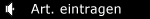
<style>
.page{position:relative;width:150px;height:19px;background:#000000}
.page>*{position:absolute;margin:0}
.t1{font:13px "Verdana";color:#ffffff}
</style>
<div class="page">
<p class="t1" style="left:31px;top:4px;width:90px;height:12px">Art. eintragen</p>
</div>
